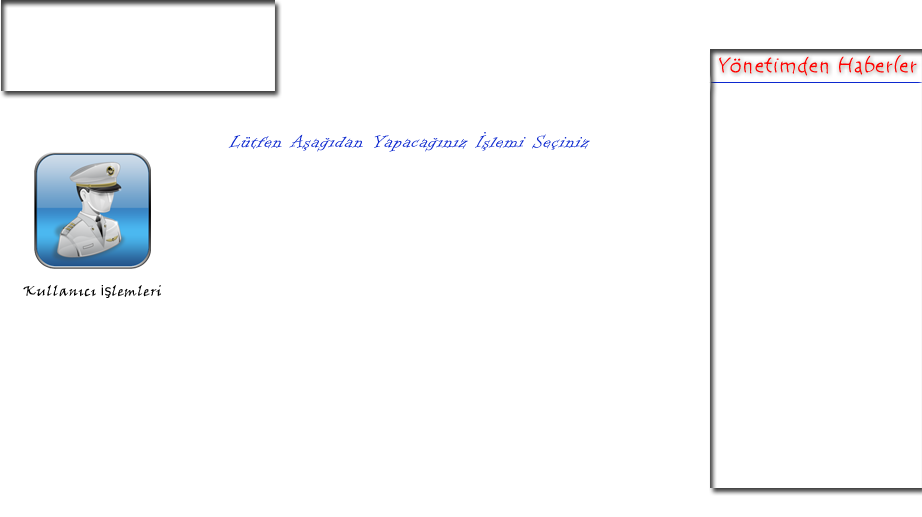
<style>
.page{position:relative;width:922px;height:517px;background:#ffffff}
.page>*{position:absolute;margin:0}
.t1{font:20px "TempusSansITC";letter-spacing:0.05em;color:#ff0000}
.t2{font:20px "InformalRoman-Regular";letter-spacing:0.05em;color:#0c28cf}
.t3{font:14px "VinerHandITC";letter-spacing:0.05em;color:#000000}
.t4{font:14px "Tahoma";letter-spacing:0.05em;color:#000000}
</style>
<div class="page">
<p class="t1" style="left:719px;top:55px;width:198px;height:21px">Yönetimden Haberler</p>
<p class="t2" style="left:228px;top:132px;width:362px;height:20px">Lütfen Aşağıdan Yapacağınız İşlemi Seçiniz</p>
<p class="t3" style="left:23px;top:285px;width:138px;height:13px">Kullanıcı <span class="t4">iş</span>lemleri</p>
</div>
